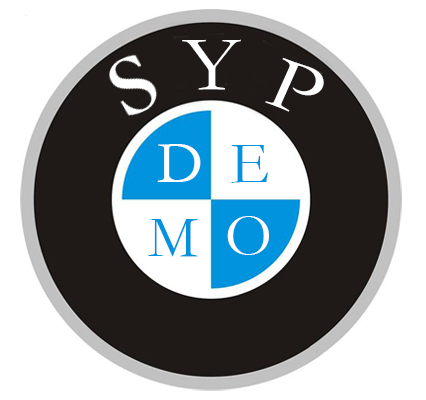
<style>
.page{position:relative;width:426px;height:400px;background:#ffffff}
.page>*{position:absolute;margin:0}
.t1{font:78.7px "STFangsong";color:#ffffff;scale:1.11 1}
.t2{font:76.6px "STFangsong";color:#ffffff;scale:1.22 1}
.t3{font:60px "STFangsong";color:#ffffff}
.t4{font:60px "STFangsong";color:#0193de}
</style>
<div class="page">
<p class="t1" style="left:182px;top:39px;width:59px;height:51px">Y</p>
<p class="t2" style="left:265px;top:58px;width:59px;height:54px;rotate:21deg">P</p>
<p class="t3" style="left:157px;top:144px;width:44px;height:38px">D</p>
<p class="t4" style="left:231px;top:145px;width:37px;height:38px">E</p>
<p class="t4" style="left:148px;top:219px;width:50px;height:38px">M</p>
<p class="t3" style="left:227px;top:216px;width:42px;height:39px">O</p>
</div>
